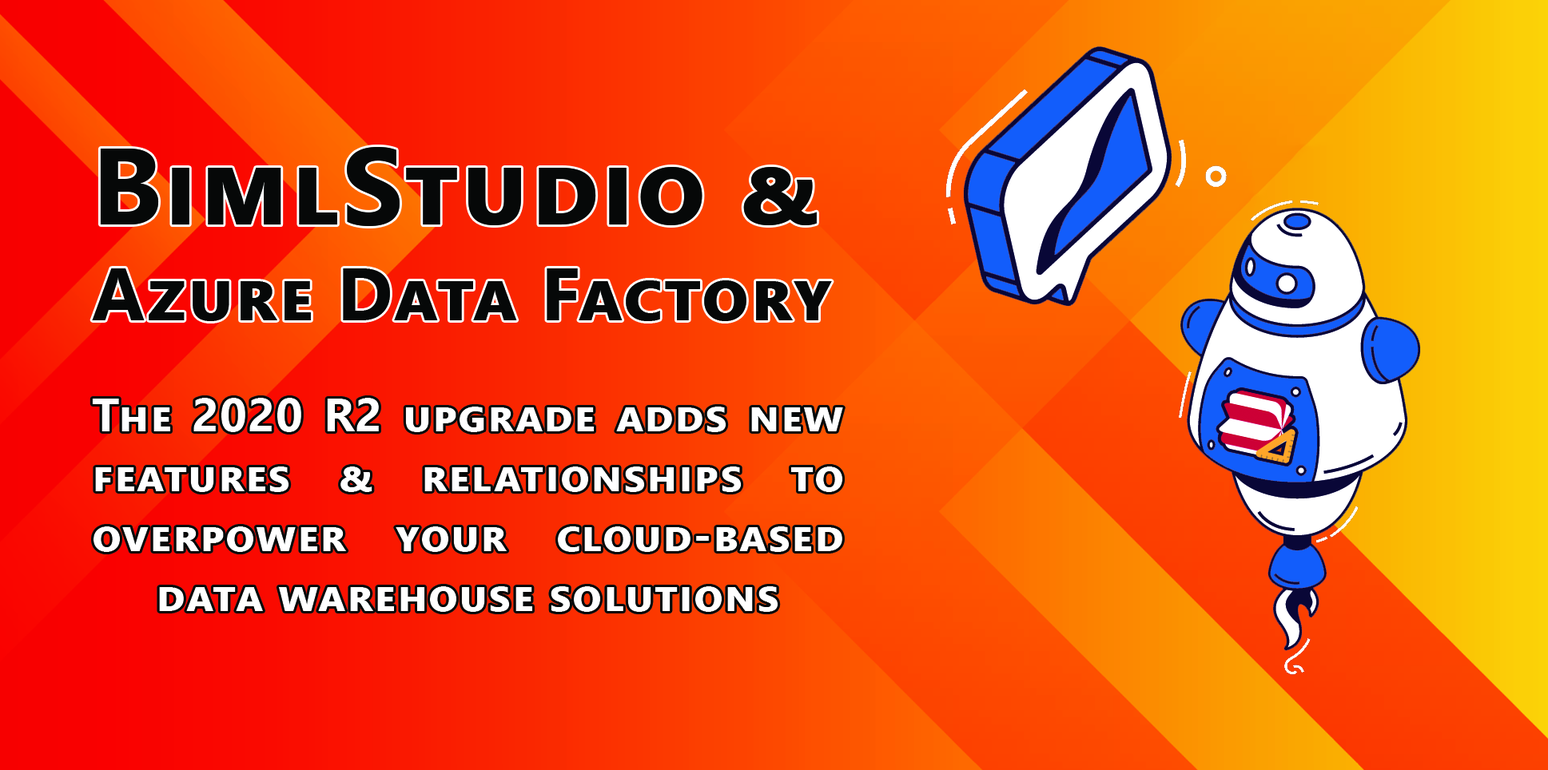
<style>
.page{position:relative;width:1548px;height:770px}
.page>*{position:absolute;margin:0}
.t1{font:74.3px "SegoeUI-Bold";letter-spacing:0.02em;color:#060808;font-variant:small-caps}
.t2{font:108.4px "SegoeUI-Bold";letter-spacing:0.02em;color:#060808;font-variant:small-caps}
.t3{font:46.4px "SegoeUI-Bold";letter-spacing:0.02em;color:#ffffff;font-variant:small-caps}
</style>
<div class="page">
<p class="t1" style="left:92px;top:147px;width:740px;height:174px"><span class="t2">BimlStudio &amp;<br></span>Azure Data Factory</p>
<p class="t3" style="left:92px;top:398px;width:751px;height:214px;text-align:justify">The 2020 R2 upgrade adds new features &amp; relationships to overpower your cloud-based data warehouse solutions</p>
</div>
